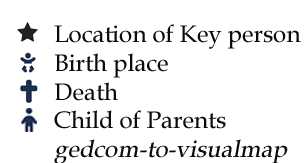
<style>
.page{position:relative;width:308px;height:163px;background:#ffffff}
.page>*{position:absolute;margin:0}
.t1{font:24px "BookAntiqua";color:#0a0b0a}
.t2{font:24px "BookAntiqua";color:#0a0b0a;font-style:italic}
</style>
<div class="page">
<p class="t1" style="left:54px;top:24px;width:247px;height:140px">Location of Key person<br>Birth place<br>Death<br>Child of Parents<br><span class="t2">gedcom-to-visualmap</span></p>
</div>
